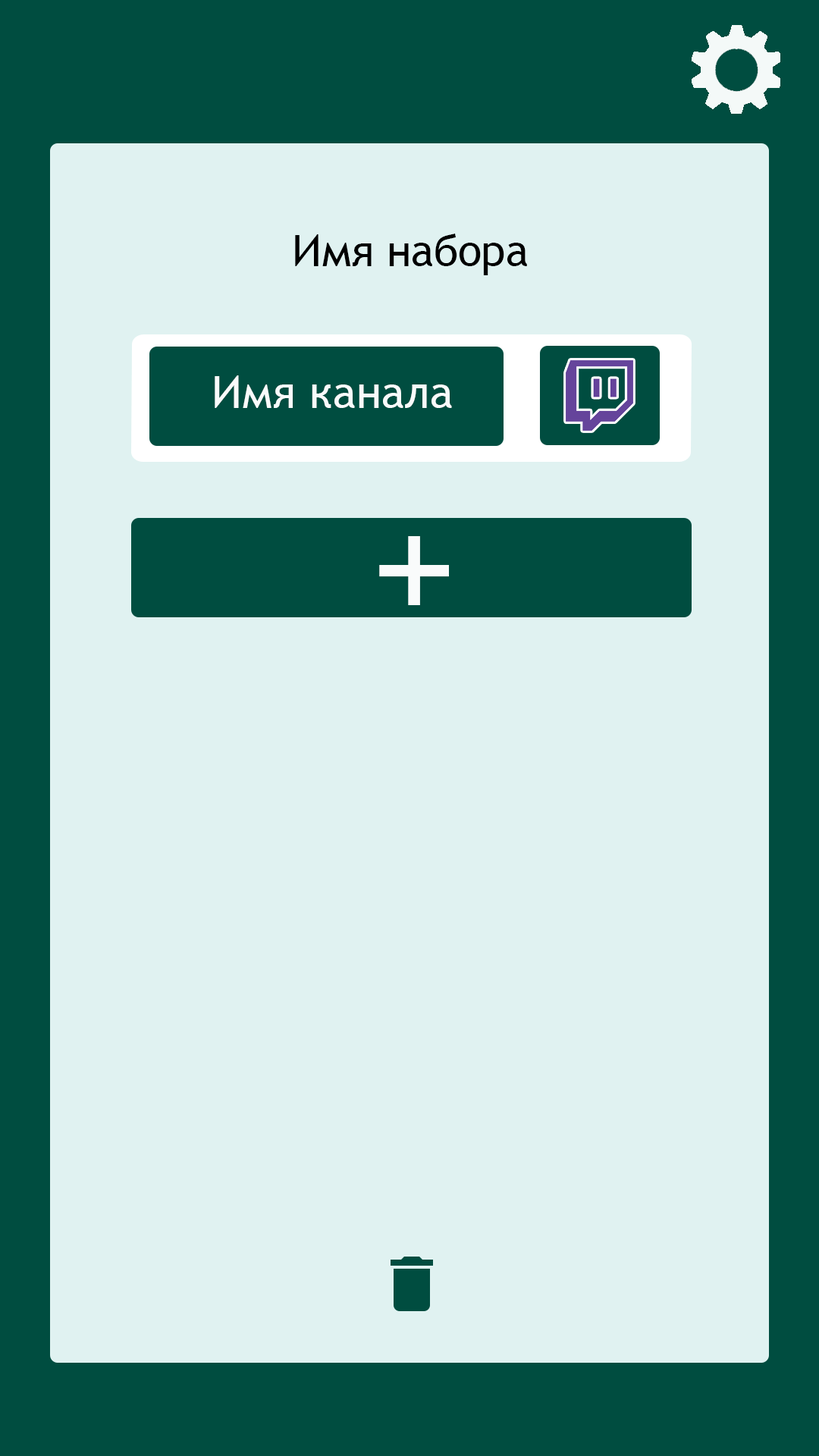
<style>
.page{position:relative;width:819px;height:1456px;background:#e0f2f1}
.page>*{position:absolute;margin:0}
.t1{font:43.6px "TrebuchetMS";color:#000000}
.t2{font:45.1px "TrebuchetMS";color:#f9fbfb}
.t3{font:169.8px "TrebuchetMS";color:#f9fbfb}
</style>
<div class="page">
<p class="t1" style="left:295px;top:234px;width:232px;height:41px">Имя набора</p>
<p class="t2" style="left:215px;top:375px;width:237px;height:33px">Имя канала</p>
<p class="t3" style="left:379px;top:536px;width:70px;height:69px">+</p>
</div>
